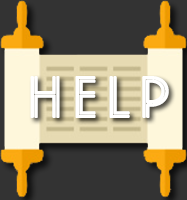
<style>
.page{position:relative;width:187px;height:200px;background:#333333}
.page>*{position:absolute;margin:0}
.t1{font:55.9px "Landmark-Inline";letter-spacing:0.1em;color:#ffffff;font-weight:bold}
</style>
<div class="page">
<p class="t1" style="left:30px;top:76px;width:139px;height:42px">HELP</p>
</div>
